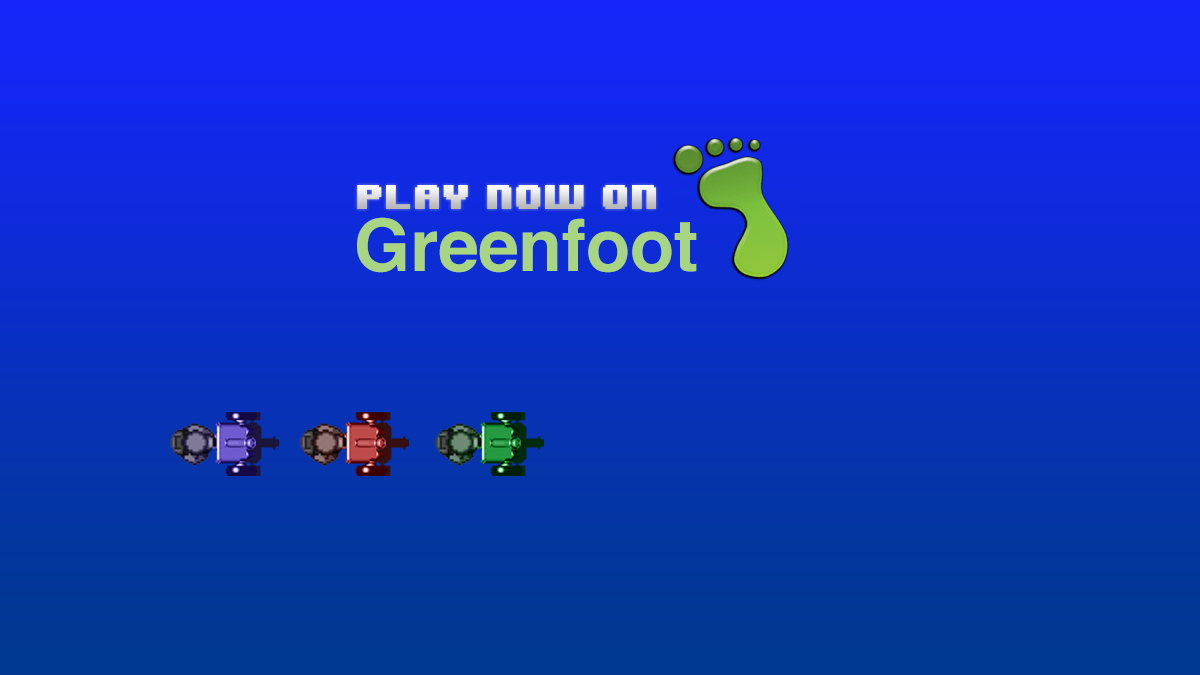
<style>
.page{position:relative;width:1200px;height:675px}
.page>*{position:absolute;margin:0}
.t1{font:28.9px "8BITWONDERNominal"}
.t2{font:72px "Helvetica-Bold";color:#a8d581}
</style>
<div class="page">
<p class="t1" style="left:357px;top:185px;width:299px;height:24px">Play now on</p>
<p class="t2" style="left:357px;top:217px;width:340px;height:56px">Greenfoot</p>
</div>
